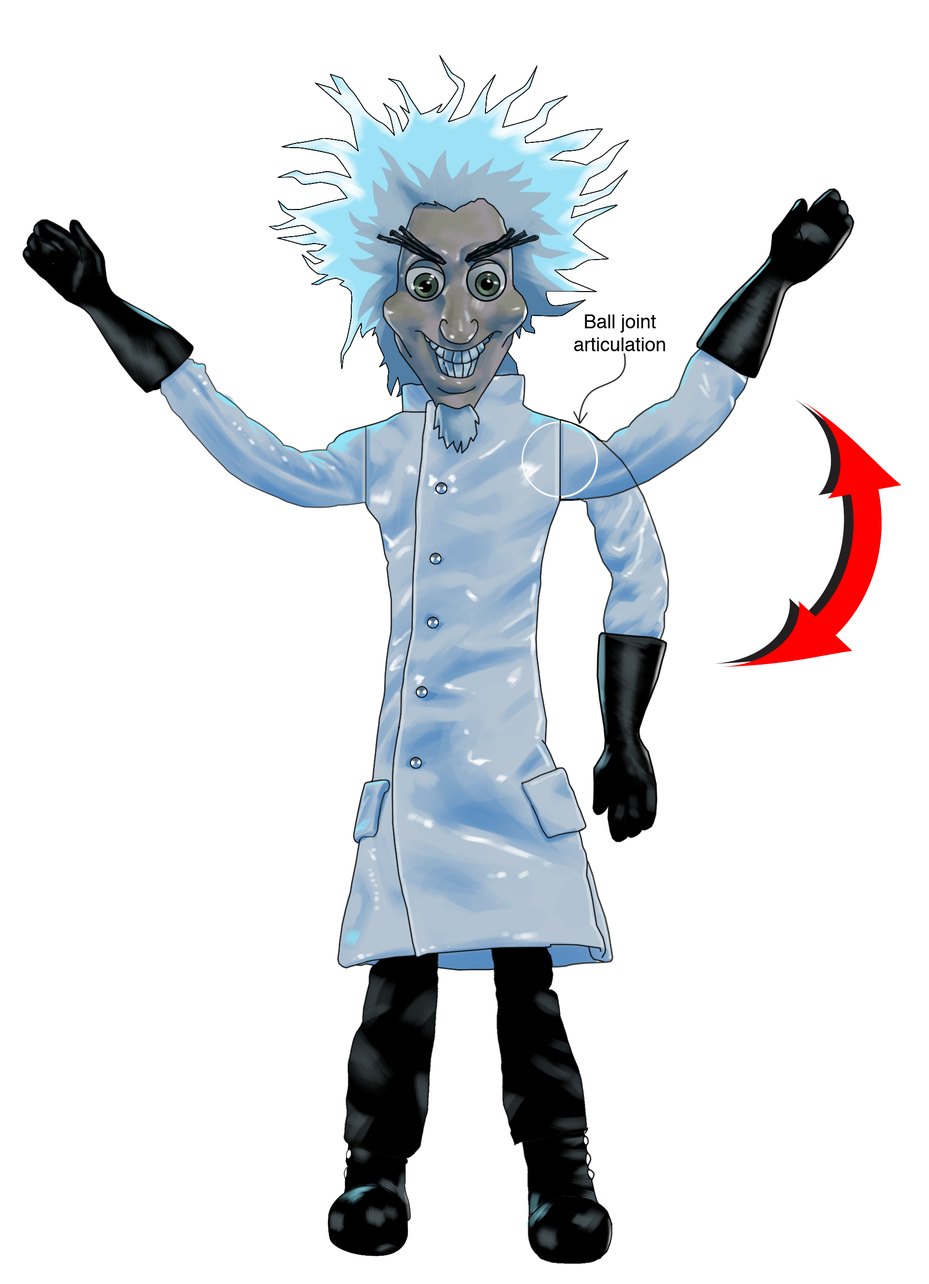
<style>
.page{position:relative;width:929px;height:1284px;background:#ffffff}
.page>*{position:absolute;margin:0}
.t1{font:19.2px "Helvetica";color:#000000}
</style>
<div class="page">
<p class="t1" style="left:574px;top:314px;width:91px;height:37px;text-align:center">Ball joint<br>articulation</p>
</div>
